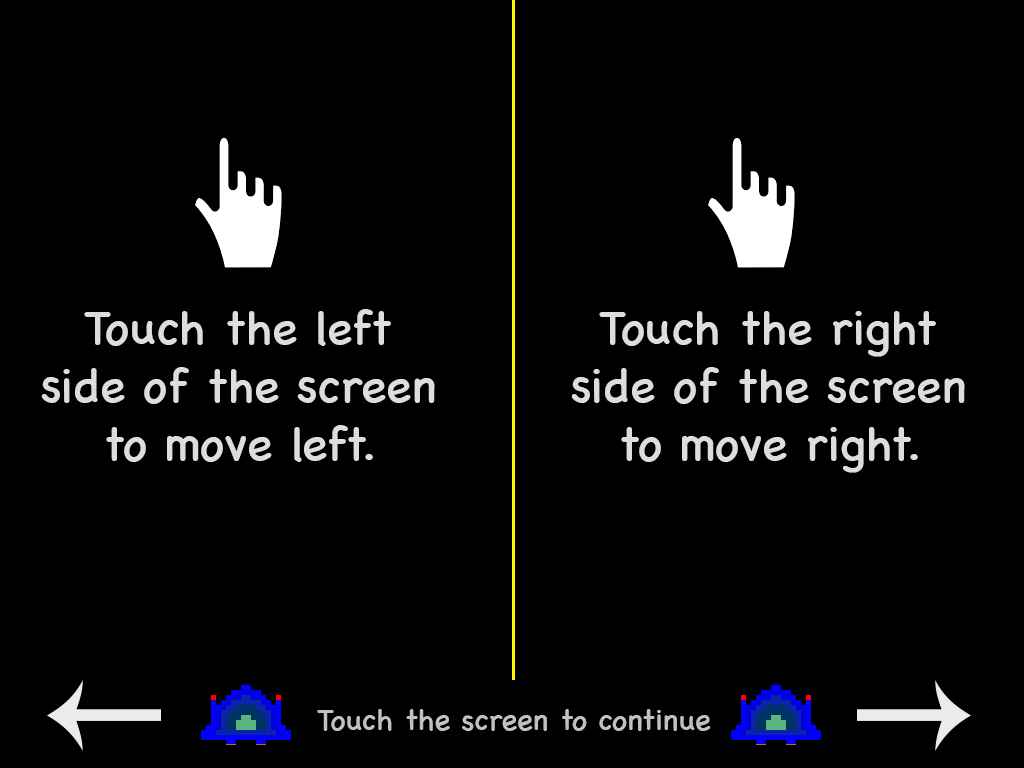
<style>
.page{position:relative;width:1024px;height:768px;background:#000000}
.page>*{position:absolute;margin:0}
.t1{font:48px "ChalkboardSE-Regular";color:#dddddd}
.t2{font:30px "ChalkboardSE-Regular";color:#c2c0c0}
</style>
<div class="page">
<p class="t1" style="left:41px;top:309px;width:394px;height:153px;text-align:center">Touch the left<br>side of the screen<br>to move left.</p>
<p class="t1" style="left:571px;top:311px;width:394px;height:162px;text-align:center">Touch the right<br>side of the screen<br>to move right.</p>
<p class="t2" style="left:317px;top:709px;width:394px;height:22px">Touch the screen to continue</p>
</div>
